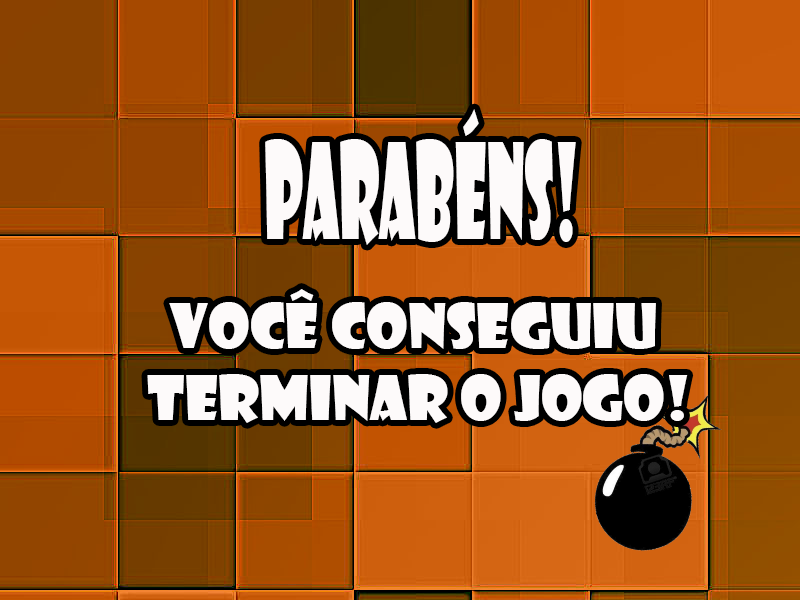
<style>
.page{position:relative;width:800px;height:600px}
.page>*{position:absolute;margin:0}
.t1{font:128.9px "ShowcardGothic-Reg";color:#fdfafa;scale:0.45 1}
.t2{font:60px "ShowcardGothic-Reg";color:#fdfafa}
</style>
<div class="page">
<p class="t1" style="left:265px;top:109px;width:311px;height:136px">Parabéns!</p>
<p class="t2" style="left:147px;top:289px;width:541px;height:134px;text-align:center">Você conseguiu <br>terminar o jogo!</p>
</div>
